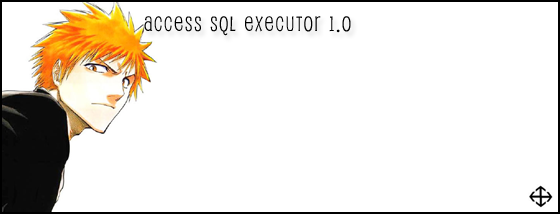
<style>
.page{position:relative;width:560px;height:214px;background:#ffffff}
.page>*{position:absolute;margin:0}
.t1{font:20px "Pupcat";letter-spacing:0.1em;color:#000000}
</style>
<div class="page">
<p class="t1" style="left:144px;top:16px;width:207px;height:20px">Access SQL Executor 1.0</p>
</div>
